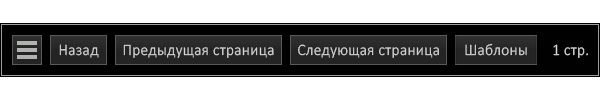
<style>
.page{position:relative;width:600px;height:100px;background:#ffffff}
.page>*{position:absolute;margin:0}
.t1{font:16px "Calibri-Light";letter-spacing:0.02em;color:#d7d7d7;scale:0.96 1}
</style>
<div class="page">
<p class="t1" style="left:59px;top:44px;width:40px;height:14px">Назад</p>
<p class="t1" style="left:123px;top:44px;width:151px;height:14px">Предыдущая страница</p>
<p class="t1" style="left:298px;top:44px;width:141px;height:14px">Следующая страница</p>
<p class="t1" style="left:465px;top:43px;width:62px;height:13px">Шаблоны</p>
<p class="t1" style="left:553px;top:44px;width:35px;height:14px">1 стр.</p>
</div>
